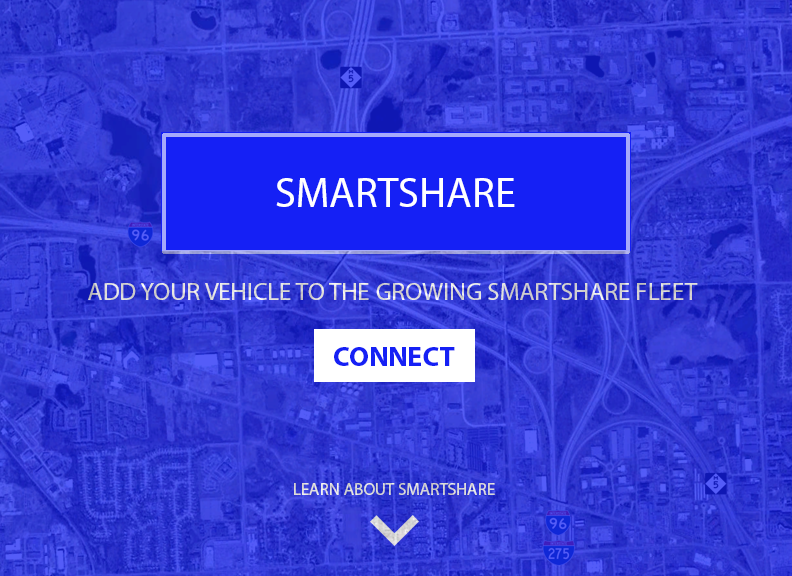
<style>
.page{position:relative;width:792px;height:576px}
.page>*{position:absolute;margin:0}
.t1{font:42px "MyriadPro-Regular";color:#ffffff}
.t2{font:25px "MyriadPro-Regular";color:#dad9d8}
.t3{font:28px "MyriadPro-Bold";color:#1520f5}
.t4{font:17px "MyriadPro-Regular";color:#d9d9d8}
</style>
<div class="page">
<p class="t1" style="left:276px;top:178px;width:239px;height:29px">SMARTSHARE</p>
<p class="t2" style="left:88px;top:283px;width:610px;height:17px">ADD YOUR VEHICLE TO THE GROWING SMARTSHARE FLEET</p>
<p class="t3" style="left:334px;top:347px;width:121px;height:19px">CONNECT</p>
<p class="t4" style="left:294px;top:483px;width:201px;height:12px">LEARN ABOUT SMARTSHARE</p>
</div>
